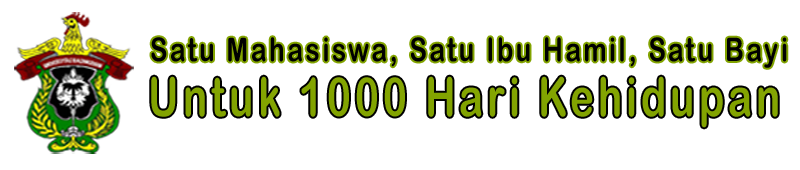
<style>
.page{position:relative;width:800px;height:170px;background:#ffffff}
.page>*{position:absolute;margin:0}
.t1{font:32.6px "ArialRoundedMTBold";letter-spacing:0.1em;color:#000000;scale:0.8 1}
.t2{font:53.7px "ArialRoundedMTBold";letter-spacing:0.1em;color:#83a400;scale:0.75 1}
</style>
<div class="page">
<p class="t1" style="left:151px;top:37px;width:636px;height:31px">Satu Mahasiswa, Satu Ibu Hamil, Satu Bayi</p>
<p class="t2" style="left:151px;top:76px;width:627px;height:52px">Untuk 1000 Hari Kehidupan</p>
</div>
